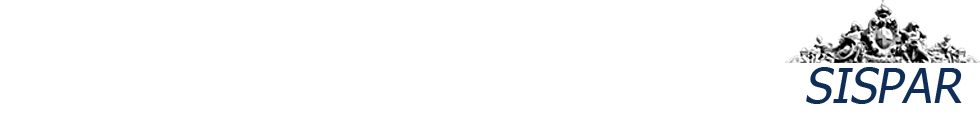
<style>
.page{position:relative;width:980px;height:137px;background:#ffffff}
.page>*{position:absolute;margin:0}
.t1{font:48px "Tahoma";color:#0e2e57;font-style:italic}
</style>
<div class="page">
<p class="t1" style="left:806px;top:67px;width:156px;height:37px">SISPAR</p>
</div>
